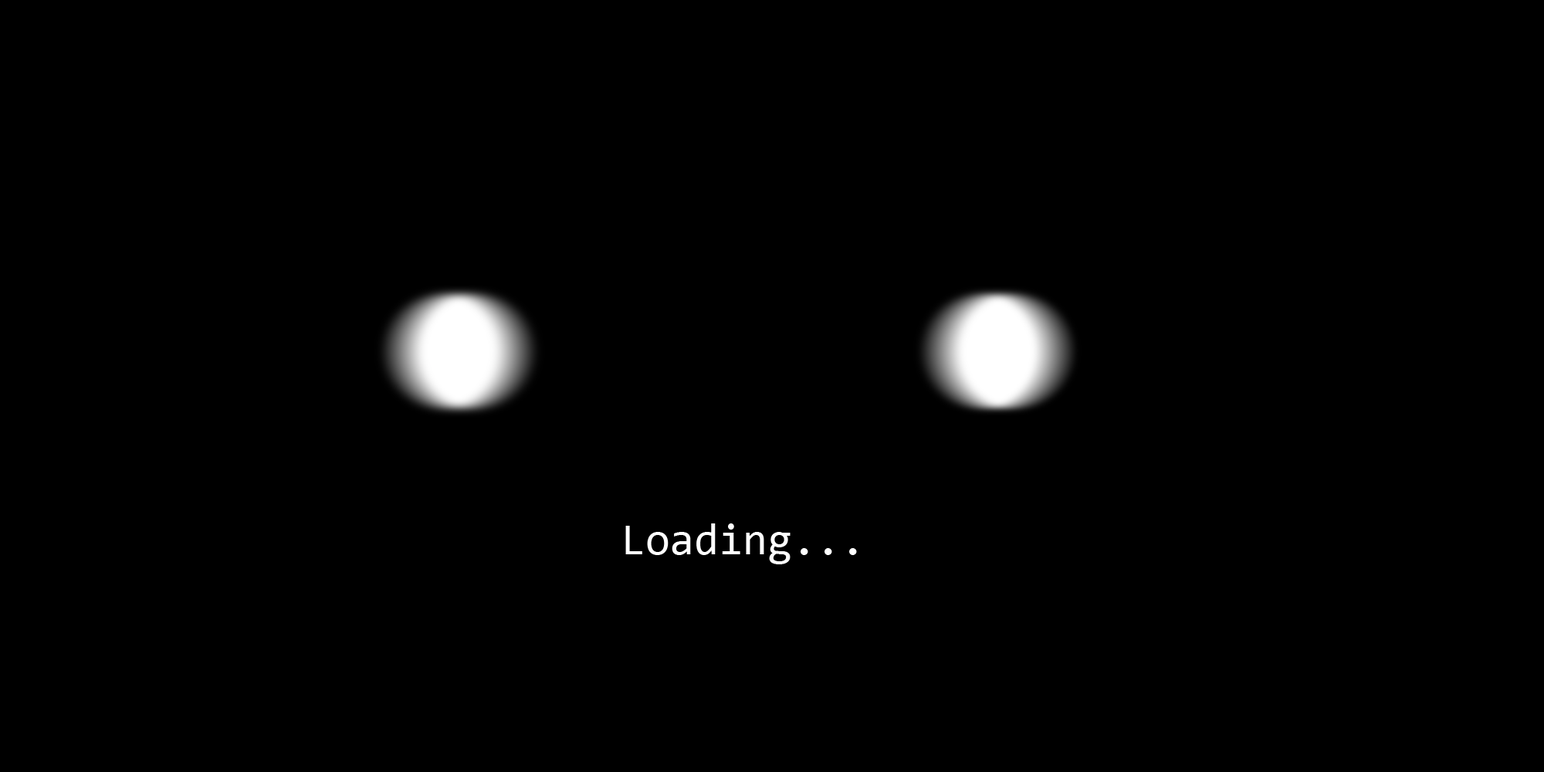
<style>
.page{position:relative;width:1544px;height:772px;background:#000000}
.page>*{position:absolute;margin:0}
.t1{font:44.5px "Consolas";color:#ffffff}
</style>
<div class="page">
<p class="t1" style="left:625px;top:524px;width:232px;height:40px">Loading...</p>
</div>
